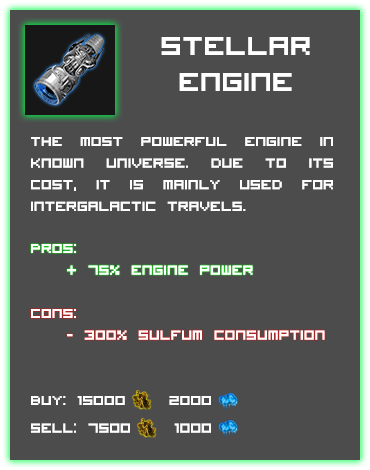
<style>
.page{position:relative;width:370px;height:470px;background:#4c4c4c}
.page>*{position:absolute;margin:0}
.t1{font:36px/12px "VisitorTT1BRK";color:#ffffff}
.t2{font:18px "VisitorTT1BRK";color:#ffffff}
</style>
<div class="page">
<p class="t1" style="left:161px;top:37px;width:149px;height:54px;text-align:center">Stellar <br><br><br>Engine</p>
<p class="t2" style="left:31px;top:137px;width:302px;height:74px;text-align:justify">The most powerful engine in known universe. Due to its cost, it is mainly used for intergalactic travels.</p>
<p class="t2" style="left:31px;top:244px;width:222px;height:31px;text-align:justify">Pros:<br> + 75% engine power</p>
<p class="t2" style="left:31px;top:309px;width:294px;height:31px;text-align:justify">Cons:<br> - 300% sulfum consumption</p>
<p class="t2" style="left:31px;top:396px;width:180px;height:37px">Buy: 15000    2000<br><br>Sell: 7500    1000</p>
</div>
